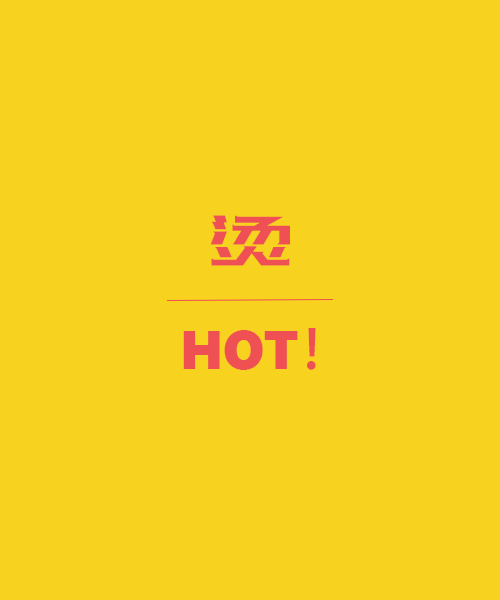
<style>
.page{position:relative;width:500px;height:600px;background:#f7d320}
.page>*{position:absolute;margin:0}
.t1{font:84.7px "HuXiaoBoKuHei";color:#f05053}
.t2{font:53.6px "SegoeUIBlack";color:#f05053}
.t3{font:53.6px "AdobeHeitiStd-Regular";color:#f05053}
</style>
<div class="page">
<p class="t1" style="left:210px;top:215px;width:80px;height:51px">烫</p>
<p class="t2" style="left:183px;top:328px;width:133px;height:42px">HOT<span class="t3">！</span></p>
</div>
